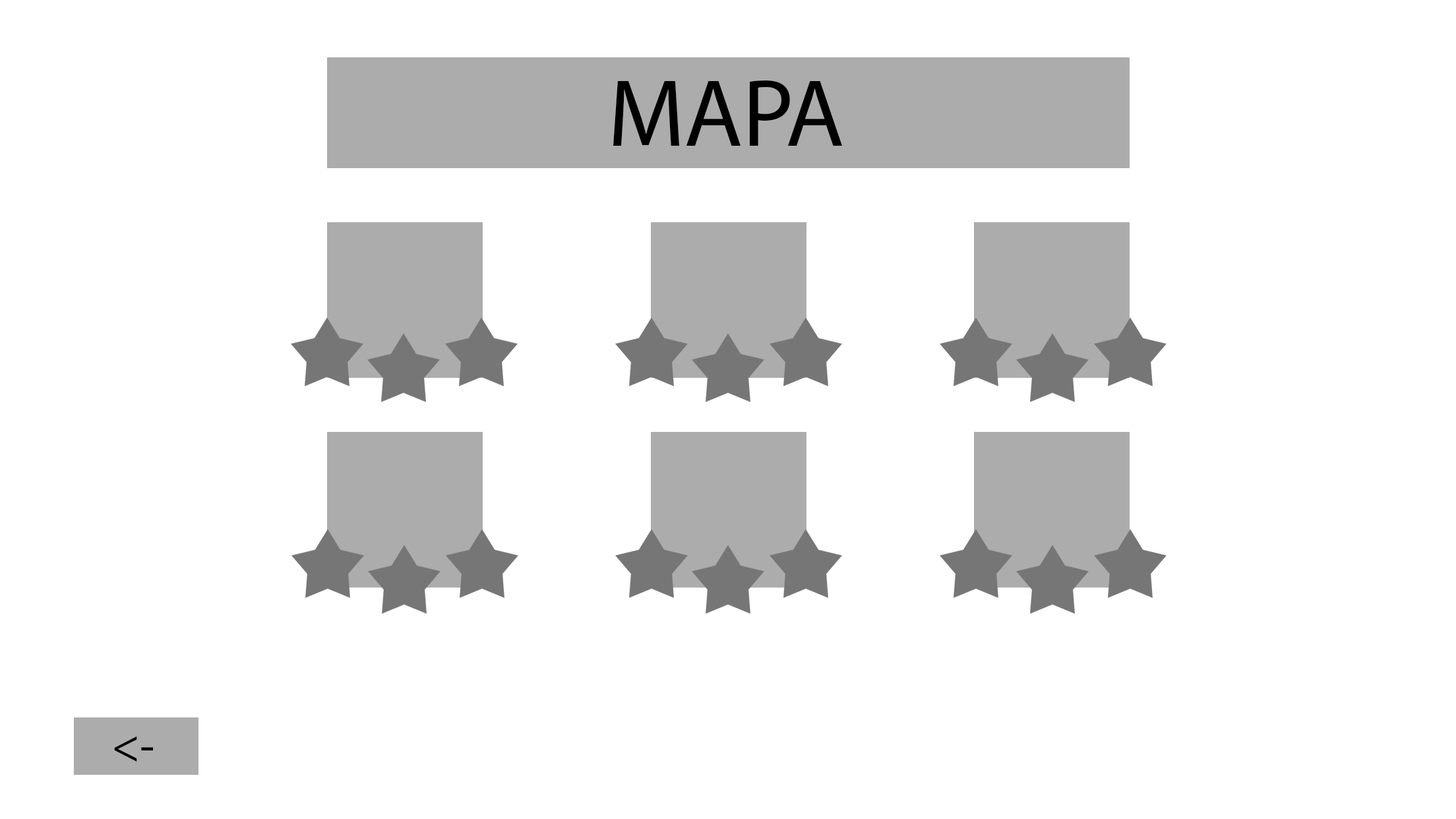
<style>
.page{position:relative;width:1456px;height:819px;background:#ffffff}
.page>*{position:absolute;margin:0}
.t1{font:95.9px "MyriadPro-Regular";color:#000000}
.t2{font:47.5px "MyriadPro-Regular";color:#000000}
</style>
<div class="page">
<p class="t1" style="left:613px;top:80px;width:229px;height:66px">MAPA</p>
<p class="t2" style="left:114px;top:736px;width:39px;height:26px">&lt;-</p>
</div>
